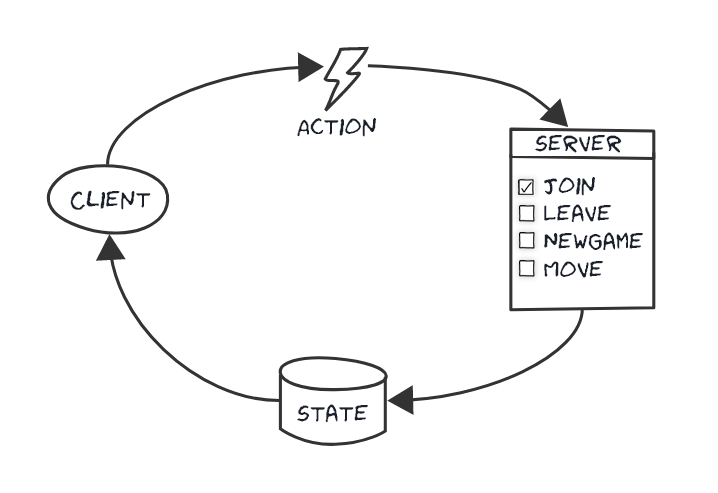
<style>
.page{position:relative;width:718px;height:493px;background:#ffffff}
.page>*{position:absolute;margin:0}
.t1{font:24px "HumorSans";color:#1a202c}
.t2{font:24px/28px "HumorSans";color:#1a202c}
.t3{font:24px/285px "HumorSans";color:#1a202c}
</style>
<div class="page">
<p class="t1" style="left:297px;top:118px;width:80px;height:19px">Action</p>
<p class="t1" style="left:535px;top:135px;width:87px;height:18px">Server</p>
<p class="t2" style="left:544px;top:177px;width:99px;height:101px"><span class="t3">Join</span><br>Leave<br>NewGame<br>Move</p>
<p class="t1" style="left:70px;top:190px;width:81px;height:20px">Client</p>
<p class="t1" style="left:297px;top:404px;width:71px;height:18px">State</p>
</div>
